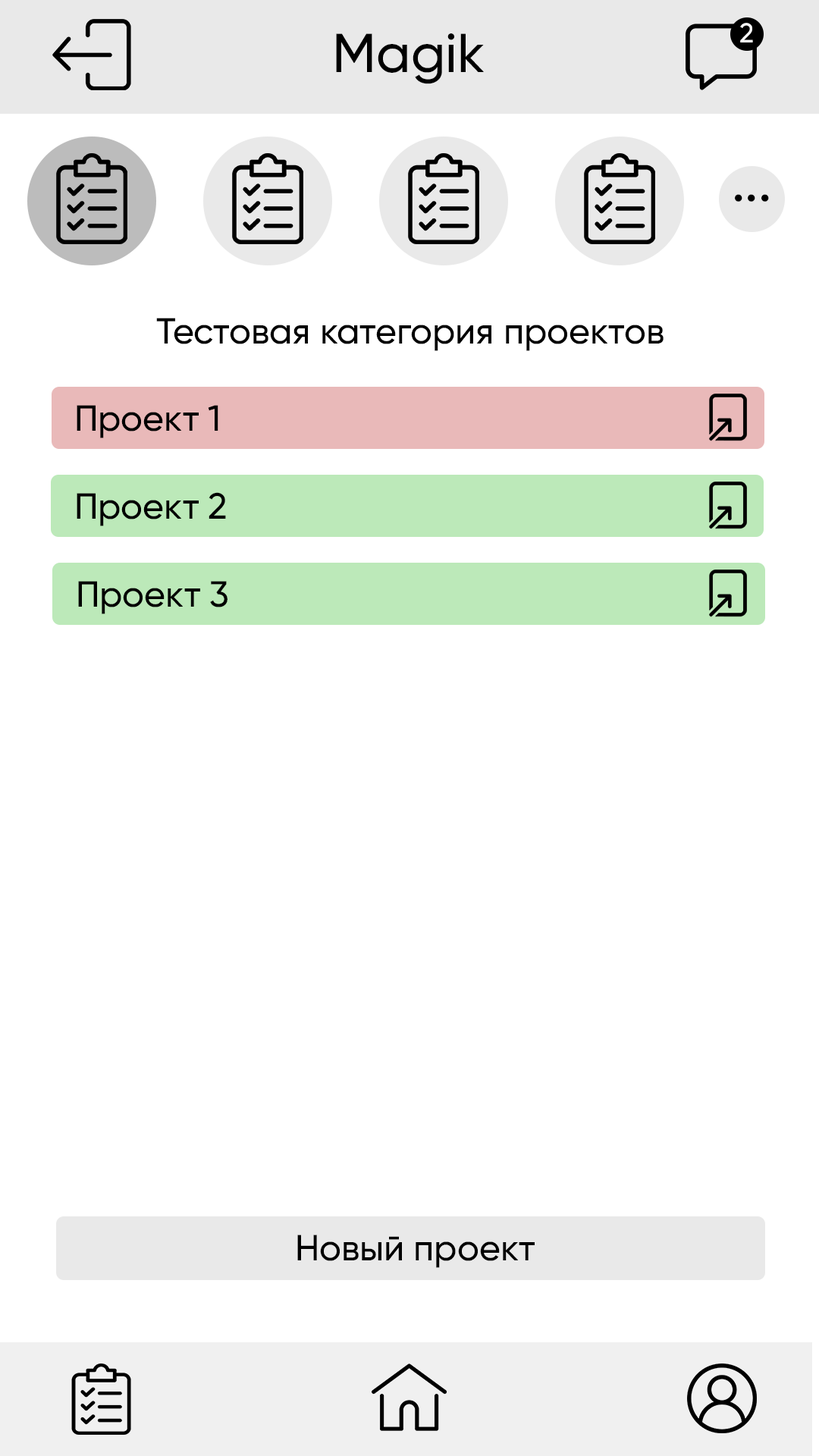
<style>
.page{position:relative;width:819px;height:1456px;background:#ffffff}
.page>*{position:absolute;margin:0}
.t1{font:27.3px "Gilroy-Medium";color:#ffffff}
.t2{font:54.6px "Gilroy-Medium";color:#000000}
.t3{font:36.4px "Gilroy-Medium";color:#000000}
</style>
<div class="page">
<p class="t1" style="left:740px;top:23px;width:13px;height:19px">2</p>
<p class="t2" style="left:336px;top:33px;width:148px;height:51px">Magik</p>
<p class="t2" style="left:735px;top:194px;width:34px;height:8px">...</p>
<p class="t3" style="left:156px;top:318px;width:508px;height:33px">Тестовая категория проектов</p>
<p class="t3" style="left:77px;top:405px;width:141px;height:33px">Проект 1</p>
<p class="t3" style="left:77px;top:492px;width:149px;height:34px">Проект 2</p>
<p class="t3" style="left:78px;top:581px;width:149px;height:33px">Проект 3</p>
<p class="t3" style="left:297px;top:1235px;width:238px;height:33px">Новый проект</p>
</div>
